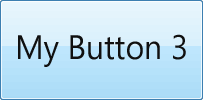
<style>
.page{position:relative;width:203px;height:100px}
.page>*{position:absolute;margin:0}
.t1{font:34.1px "SegoeUI";color:#101010;scale:0.94 1}
</style>
<div class="page">
<p class="t1" style="left:18px;top:34px;width:168px;height:33px">My Button 3</p>
</div>
